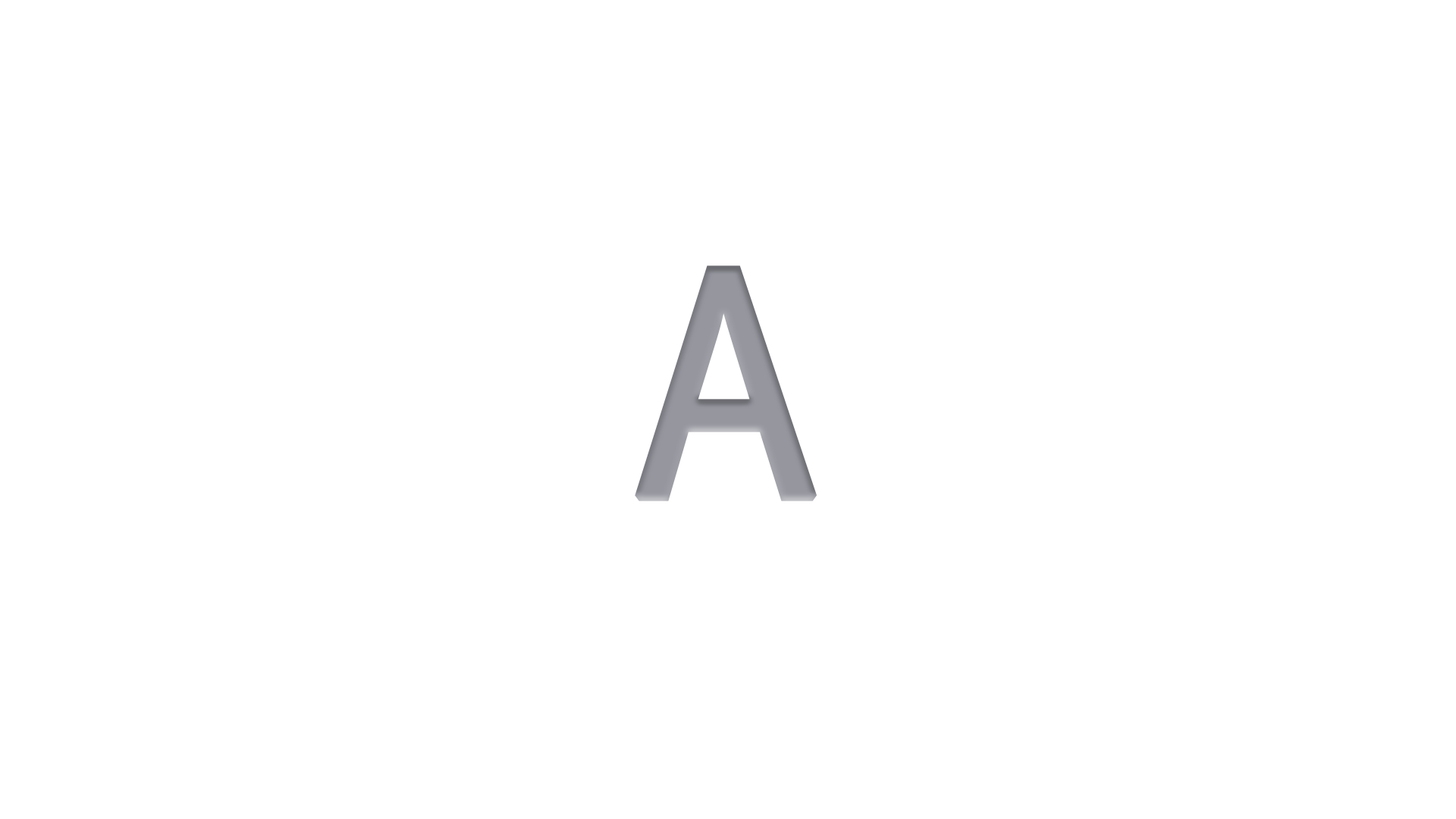
<style>
.page{position:relative;width:1456px;height:819px;background:#ffffff}
.page>*{position:absolute;margin:0}
.t1{font:316px "ArialNarrow";letter-spacing:0.025em;color:#95969e;font-weight:bold}
</style>
<div class="page">
<p class="t1" style="left:635px;top:265px;width:182px;height:236px">A</p>
</div>
